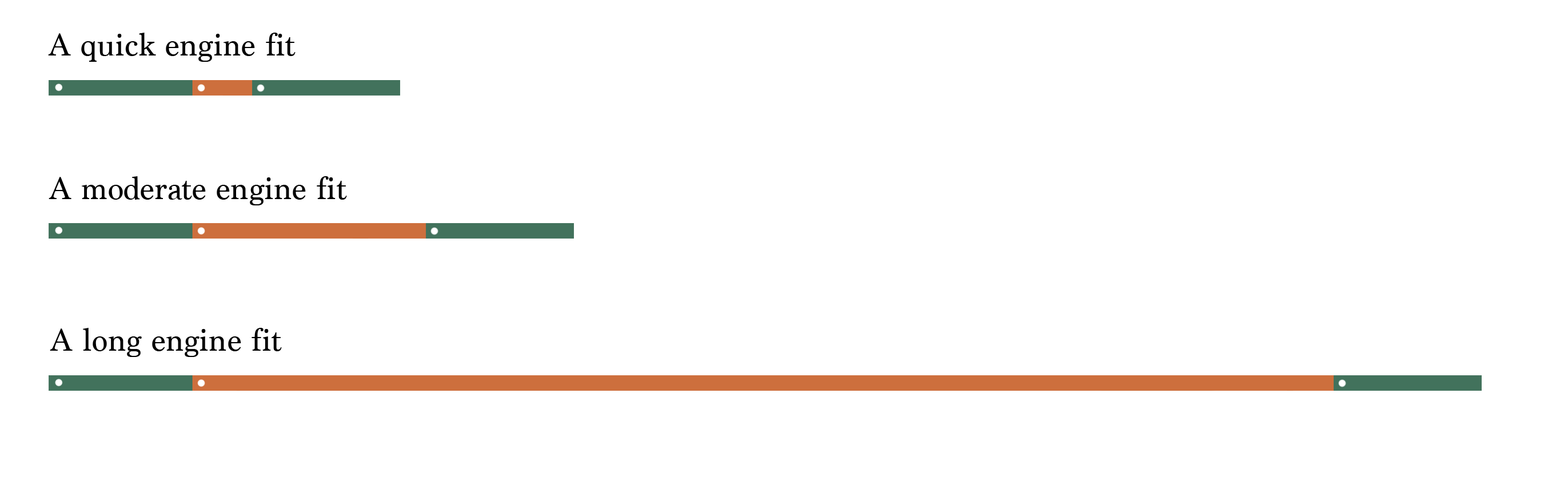
<style>
.page{position:relative;width:1568px;height:484px;background:#ffffff}
.page>*{position:absolute;margin:0}
.t1{font:33.3px "Marion-Regular";color:#000000}
</style>
<div class="page">
<p class="t1" style="left:48px;top:33px;width:248px;height:29px">A quick engine fit</p>
<p class="t1" style="left:49px;top:176px;width:298px;height:29px">A moderate engine fit</p>
<p class="t1" style="left:50px;top:328px;width:232px;height:29px">A long engine fit</p>
</div>
